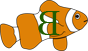
<style>
.page{position:relative;width:88px;height:51px;background:#ffffff}
.page>*{position:absolute;margin:0}
.t1{font:35px "TimesNewRomanPSMT";color:#215d00}
</style>
<div class="page">
<p class="t1" style="left:38px;top:11px;width:22px;height:24px;rotate:180deg">B</p>
</div>
